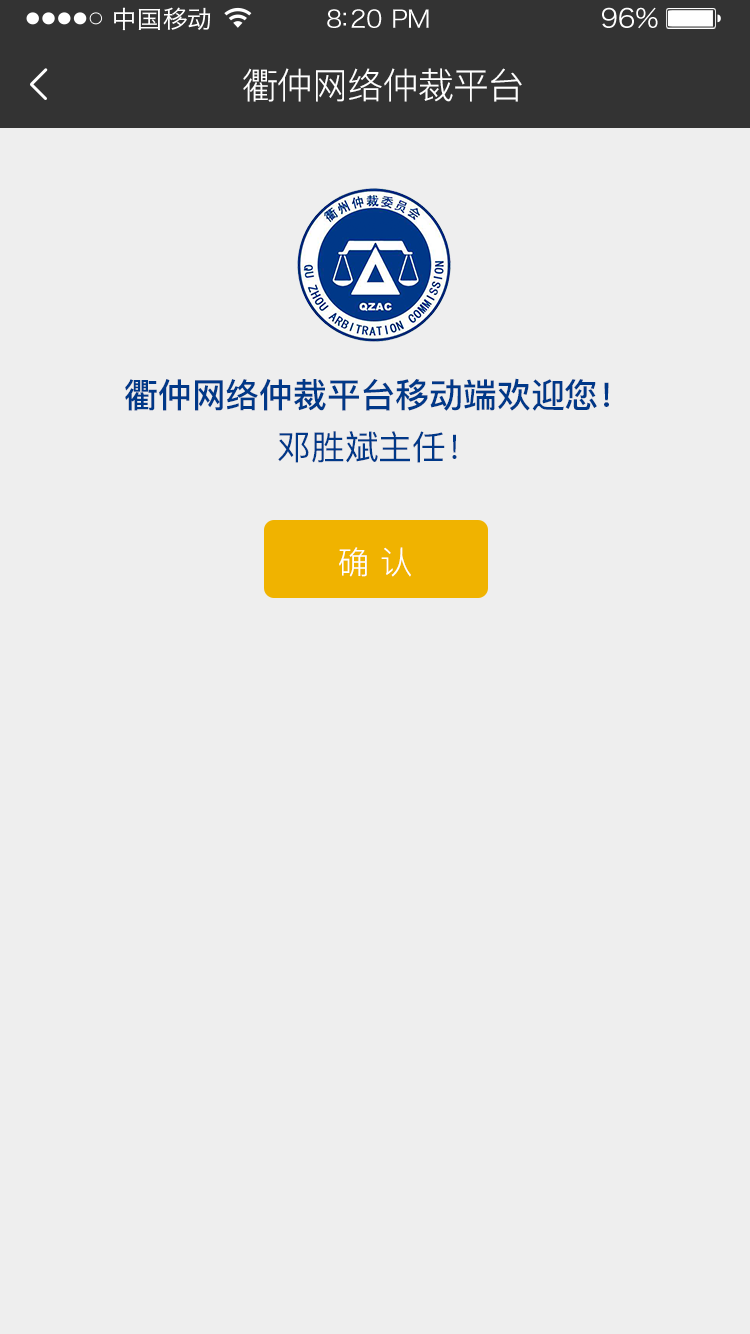
<style>
.page{position:relative;width:750px;height:1334px;background:#eeeeee}
.page>*{position:absolute;margin:0}
.t1{font:24px "HiraginoSansGB-W3";letter-spacing:0.02em;color:#ffffff;scale:1.03 1}
.t2{font:24px "HiraginoSansGB-W3";letter-spacing:-0.02em;color:#ffffff;scale:1.03 1}
.t3{font:26.2px "HiraginoSansGB-W3";letter-spacing:-0.02em;color:#ffffff;scale:1.03 1}
.t4{font:36px "PingFang-SC-Regular";letter-spacing:-0.02em;color:#ffffff}
.t5{font:34px "PingFang-SC-Bold";color:#003888;font-variant:small-caps}
.t6{font:34px "PingFang-SC-Medium";color:#003888;font-variant:small-caps}
.t7{font:32px "PingFang-SC-Regular";color:#ffffff}
</style>
<div class="page">
<p class="t1" style="left:114px;top:7px;width:97px;height:24px">中国移动</p>
<p class="t2" style="left:327px;top:9px;width:102px;height:19px">8:20 PM</p>
<p class="t3" style="left:602px;top:7px;width:56px;height:22px">96%</p>
<p class="t4" style="left:243px;top:68px;width:279px;height:34px">衢仲网络仲裁平台</p>
<p class="t5" style="left:125px;top:378px;width:484px;height:33px">衢仲网络仲裁平台移动端欢迎您！</p>
<p class="t6" style="left:278px;top:431px;width:179px;height:32px">邓胜斌主任！</p>
<p class="t7" style="left:339px;top:547px;width:72px;height:30px">确 认</p>
</div>
